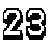
<style>
.page{position:relative;width:48px;height:48px;background:#ffffff}
.page>*{position:absolute;margin:0}
.t1{font:36px "KarmaFuture-Regular";color:#010101}
</style>
<div class="page">
<p class="t1" style="left:3px;top:8px;width:43px;height:32px">23</p>
</div>
